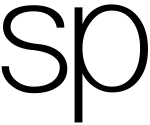
<style>
.page{position:relative;width:150px;height:125px;background:#ffffff}
.page>*{position:absolute;margin:0}
.t1{font:158.4px "ShreeDev0714";letter-spacing:-0.075em;color:#000000}
</style>
<div class="page">
<p class="t1" style="left:1px;top:4px;width:147px;height:119px">sp</p>
</div>
